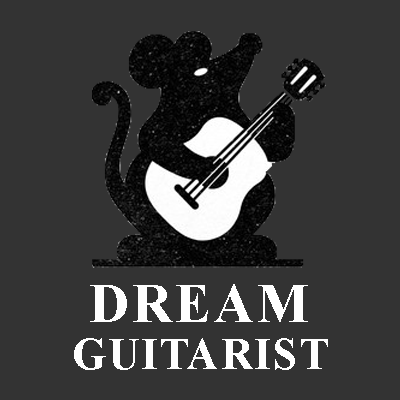
<style>
.page{position:relative;width:400px;height:400px;background:#333333}
.page>*{position:absolute;margin:0}
.t1{font:95.4px "TimesNewRomanPS-BoldMT";letter-spacing:0.06em;color:#ffffff;text-transform:uppercase}
.t2{font:75.9px "TimesNewRomanPS-BoldMT";letter-spacing:0.06em;color:#ffffff;text-transform:uppercase}
</style>
<div class="page">
<p class="t1" style="left:90px;top:284px;width:218px;height:38px">Dream</p>
<p class="t2" style="left:74px;top:338px;width:254px;height:32px">Guitarist</p>
</div>
